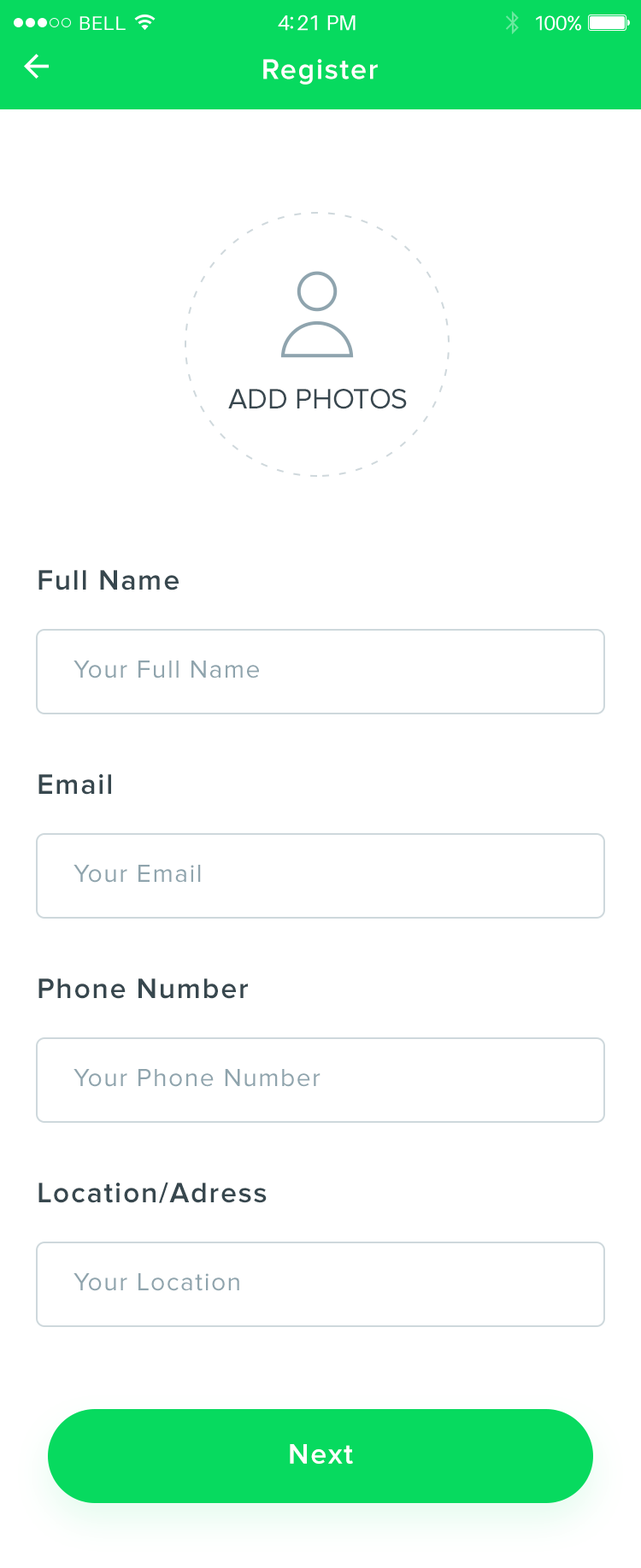
<style>
.page{position:relative;width:641px;height:1568px;background:#ffffff}
.page>*{position:absolute;margin:0}
.t1{font:29.1px "ProximaNova-Semibold";letter-spacing:0.05em;color:#ffffff}
.t2{font:29.2px "ProximaNova-Regular";letter-spacing:-0.01em;color:#38474f}
.t3{font:29px "ProximaNova-Semibold";letter-spacing:0.05em;color:#37474e}
.t4{font:25.6px "ProximaNova-Regular";letter-spacing:0.05em;color:#8fa4ad}
</style>
<div class="page">
<p class="t1" style="left:263px;top:59px;width:115px;height:26px">Register</p>
<p class="t2" style="left:228px;top:389px;width:179px;height:20px">ADD PHOTOS</p>
<p class="t3" style="left:38px;top:570px;width:141px;height:20px">Full Name</p>
<p class="t4" style="left:73px;top:661px;width:186px;height:17px">Your Full Name</p>
<p class="t3" style="left:38px;top:774px;width:73px;height:21px">Email</p>
<p class="t4" style="left:73px;top:865px;width:128px;height:18px">Your Email</p>
<p class="t3" style="left:38px;top:978px;width:210px;height:21px">Phone Number</p>
<p class="t4" style="left:73px;top:1069px;width:247px;height:18px">Your Phone Number</p>
<p class="t3" style="left:38px;top:1182px;width:229px;height:21px">Location/Adress</p>
<p class="t4" style="left:73px;top:1273px;width:166px;height:18px">Your Location</p>
<p class="t1" style="left:290px;top:1444px;width:63px;height:20px">Next</p>
</div>
